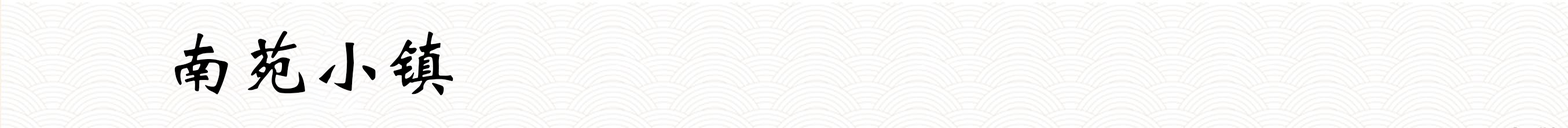
<style>
.page{position:relative;width:1568px;height:128px}
.page>*{position:absolute;margin:0}
.t1{font:73.6px "STXinwei";color:#000000}
</style>
<div class="page">
<p class="t1" style="left:174px;top:31px;width:279px;height:65px">南苑小镇</p>
</div>
